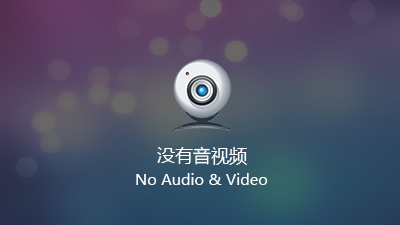
<style>
.page{position:relative;width:400px;height:225px}
.page>*{position:absolute;margin:0}
.t1{font:18px "MicrosoftYaHei";color:#ffffff}
.t2{font:15px "MicrosoftYaHei";color:#ffffff}
</style>
<div class="page">
<p class="t1" style="left:157px;top:146px;width:90px;height:19px">没有音视频</p>
<p class="t2" style="left:136px;top:173px;width:132px;height:12px">No Audio &amp; Video</p>
</div>
